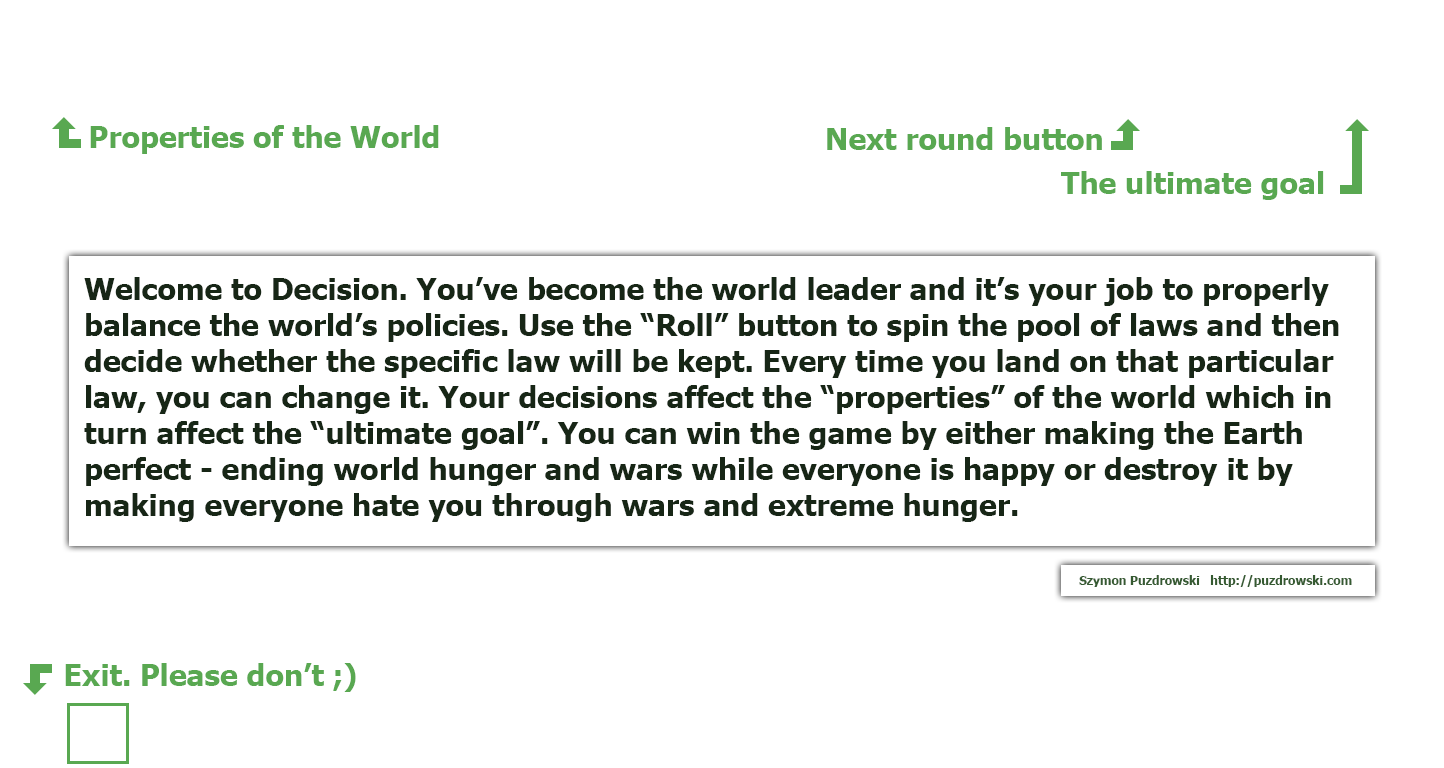
<style>
.page{position:relative;width:1444px;height:768px;background:#ffffff}
.page>*{position:absolute;margin:0}
.t1{font:30px "Tahoma-Bold";color:#59a851}
.t2{font:30px "Tahoma-Bold";color:#172616}
.t3{font:12px "Tahoma-Bold";color:#355a31}
</style>
<div class="page">
<p class="t1" style="left:90px;top:125px;width:349px;height:29px">Properties of the World</p>
<p class="t1" style="left:827px;top:127px;width:275px;height:23px">Next round button</p>
<p class="t1" style="left:1061px;top:171px;width:263px;height:29px">The ultimate goal</p>
<p class="t2" style="left:84px;top:277px;width:1255px;height:245px">Welcome to Decision. You’ve become the world leader and it’s your job to properly<br>balance the world’s policies. Use the “Roll” button to spin the pool of laws and then<br>decide whether the specific law will be kept. Every time you land on that particular <br>law, you can change it. Your decisions affect the “properties” of the world which in<br>turn affect the “ultimate goal”. You can win the game by either making the Earth<br>perfect - ending world hunger and wars while everyone is happy or destroy it by<br>making everyone hate you through wars and extreme hunger.</p>
<p class="t3" style="left:1079px;top:575px;width:273px;height:12px">Szymon Puzdrowski   http://puzdrowski.com</p>
<p class="t1" style="left:65px;top:663px;width:291px;height:29px">Exit. Please don’t ;)</p>
</div>
